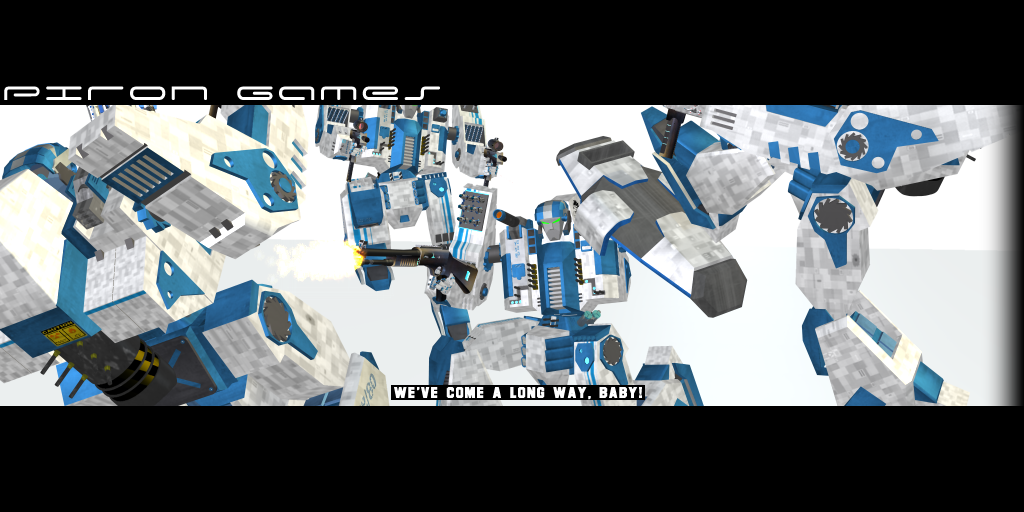
<style>
.page{position:relative;width:1024px;height:512px;background:#000000}
.page>*{position:absolute;margin:0}
.t1{font:48px "Captain-Podd-Regular";letter-spacing:0.1em;color:#ffffff}
.t2{font:12px "Font";letter-spacing:0.1em;color:#ffffff;text-transform:uppercase}
</style>
<div class="page">
<p class="t1" style="left:4px;top:86px;width:436px;height:14px">PIRON GAMES</p>
<p class="t2" style="left:394px;top:387px;width:248px;height:13px">We've come a long way, Baby!</p>
</div>
